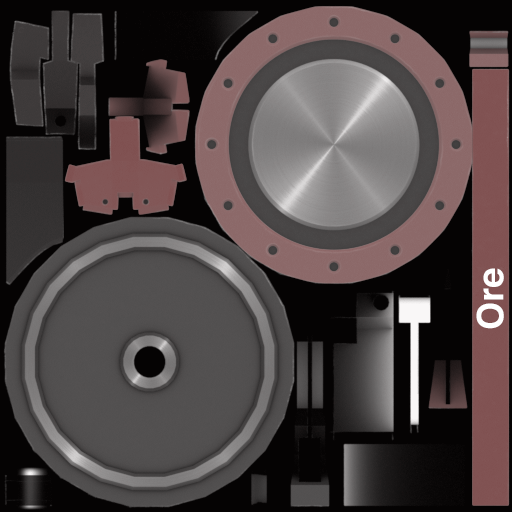
<style>
.page{position:relative;width:512px;height:512px;background:#050303}
.page>*{position:absolute;margin:0}
.t1{font:36px "Helvetica-Bold";color:#ffffff}
</style>
<div class="page">
<p class="t1" style="left:476px;top:268px;width:28px;height:61px;rotate:-90deg">Ore</p>
</div>
